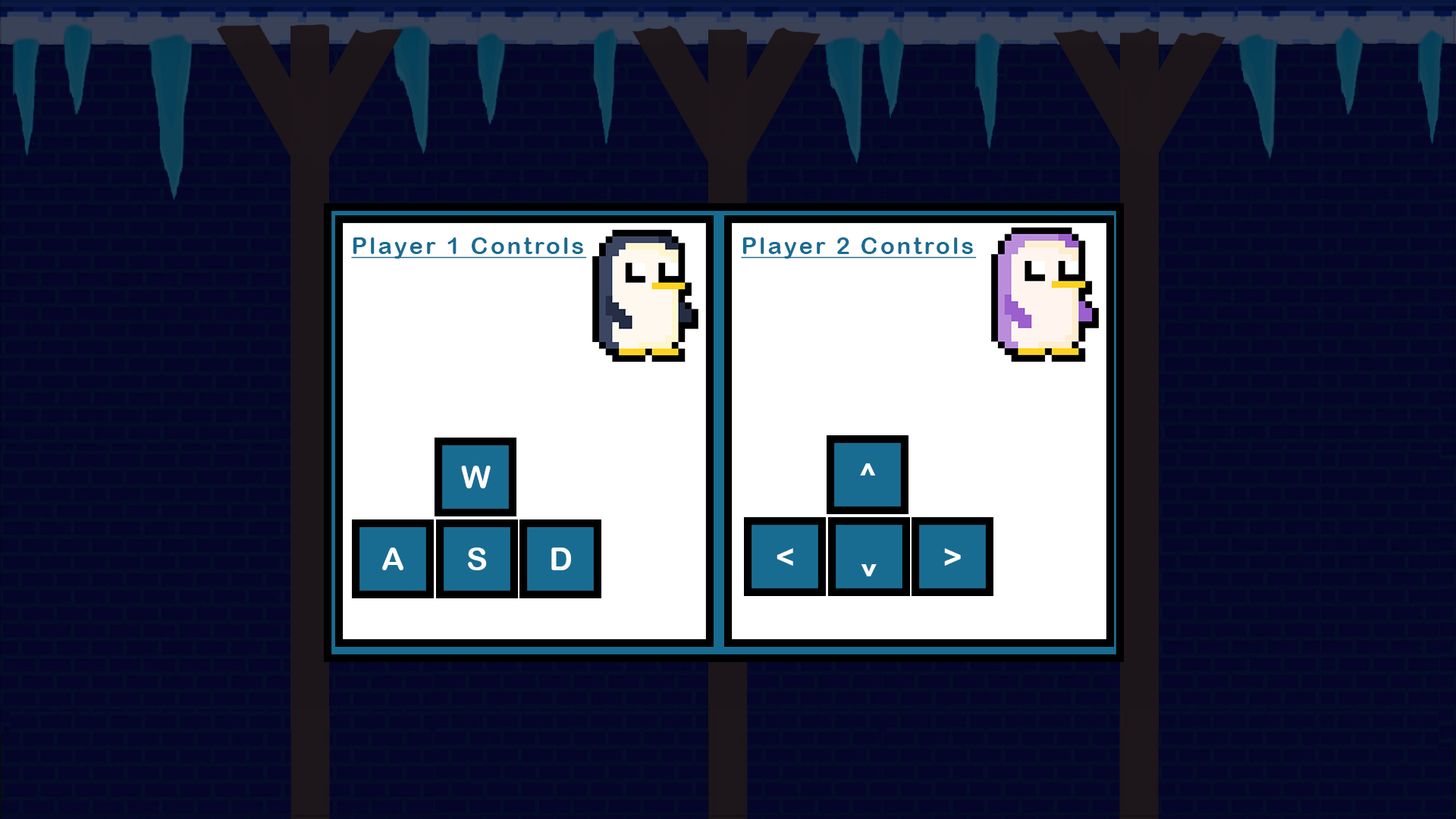
<style>
.page{position:relative;width:1456px;height:819px}
.page>*{position:absolute;margin:0}
.t1{font:23.5px "ArialRoundedMTBold";letter-spacing:0.1em;color:#196c91;text-decoration:underline}
.t2{font:31.8px "ArialRoundedMTBold";letter-spacing:0.1em;color:#fefefe}
</style>
<div class="page">
<p class="t1" style="left:351px;top:237px;width:236px;height:22px">Player 1 Controls</p>
<p class="t1" style="left:741px;top:237px;width:236px;height:22px">Player 2 Controls</p>
<p class="t2" style="left:461px;top:466px;width:30px;height:22px">W</p>
<p class="t2" style="left:860px;top:463px;width:16px;height:12px">^</p>
<p class="t2" style="left:382px;top:548px;width:21px;height:22px">A</p>
<p class="t2" style="left:468px;top:548px;width:19px;height:22px">S</p>
<p class="t2" style="left:551px;top:548px;width:20px;height:22px">D</p>
<p class="t2" style="left:777px;top:548px;width:16px;height:18px">&lt;</p>
<p class="t2" style="left:944px;top:548px;width:17px;height:18px">&gt;</p>
<p class="t2" style="left:861px;top:564px;width:16px;height:12px;rotate:180deg">^</p>
</div>
